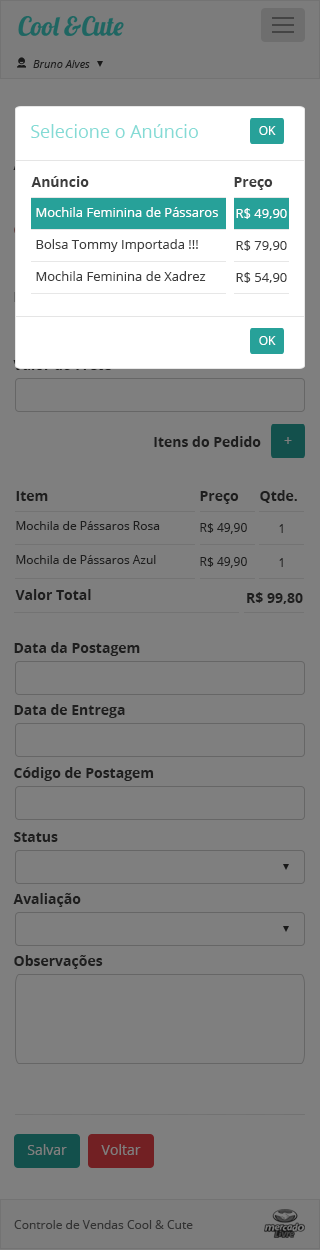
<style>
.page{position:relative;width:320px;height:1250px;background:#7f7f7f}
.page>*{position:absolute;margin:0}
.t1{font:11px "OpenSans-Italic";color:#1e1e1e}
.t2{font:18px "OpenSans";color:#83dbd5}
.t3{font:12px "OpenSans";color:#ffffff}
.t4{font:14px "OpenSans-Bold";color:#3d3d3d}
.t5{font:13px "OpenSans";color:#ffffff}
.t6{font:13px "OpenSans";color:#3d3d3d}
.t7{font:14px "OpenSans-Bold";color:#1e1e1e}
.t8{font:14px "OpenSans";color:#7f7f7f}
.t9{font:12px "OpenSans";color:#1e1e1e}
.t10{font:12px "OpenSans";color:#3d3d3d}
.t11{font:12px "OpenSans";color:#333333}
</style>
<div class="page">
<p class="t1" style="left:33px;top:60px;width:57px;height:8px">Bruno Alves</p>
<p class="t2" style="left:31px;top:124px;width:167px;height:14px">Selecione o Anúncio</p>
<p class="t3" style="left:259px;top:126px;width:17px;height:9px">OK</p>
<p class="t4" style="left:31px;top:176px;width:58px;height:11px">Anúncio</p>
<p class="t4" style="left:234px;top:177px;width:39px;height:13px">Preço</p>
<p class="t5" style="left:36px;top:207px;width:182px;height:10px">Mochila Feminina de Pássaros</p>
<p class="t5" style="left:236px;top:208px;width:51px;height:11px">R$ 49,90</p>
<p class="t6" style="left:36px;top:239px;width:162px;height:13px">Bolsa Tommy Importada !!!</p>
<p class="t6" style="left:236px;top:240px;width:51px;height:11px">R$ 79,90</p>
<p class="t6" style="left:36px;top:271px;width:170px;height:10px">Mochila Feminina de Xadrez</p>
<p class="t6" style="left:236px;top:272px;width:51px;height:11px">R$ 54,90</p>
<p class="t3" style="left:259px;top:336px;width:17px;height:9px">OK</p>
<p class="t7" style="left:154px;top:436px;width:107px;height:11px">Itens do Pedido</p>
<p class="t8" style="left:284px;top:437px;width:8px;height:7px">+</p>
<p class="t7" style="left:16px;top:491px;width:32px;height:10px">Item</p>
<p class="t7" style="left:200px;top:491px;width:39px;height:13px">Preço</p>
<p class="t7" style="left:260px;top:490px;width:37px;height:13px">Qtde.</p>
<p class="t9" style="left:16px;top:521px;width:144px;height:9px">Mochila de Pássaros Rosa</p>
<p class="t9" style="left:200px;top:523px;width:47px;height:11px">R$ 49,90</p>
<p class="t10" style="left:279px;top:524px;width:4px;height:9px">1</p>
<p class="t9" style="left:16px;top:555px;width:140px;height:9px">Mochila de Pássaros Azul</p>
<p class="t9" style="left:200px;top:557px;width:47px;height:11px">R$ 49,90</p>
<p class="t10" style="left:279px;top:558px;width:4px;height:9px">1</p>
<p class="t7" style="left:15px;top:589px;width:76px;height:11px">Valor Total</p>
<p class="t7" style="left:247px;top:592px;width:56px;height:12px">R$ 99,80</p>
<p class="t7" style="left:14px;top:642px;width:126px;height:14px">Data da Postagem</p>
<p class="t7" style="left:14px;top:704px;width:111px;height:14px">Data de Entrega</p>
<p class="t7" style="left:14px;top:767px;width:140px;height:14px">Código de Postagem</p>
<p class="t7" style="left:14px;top:832px;width:44px;height:10px">Status</p>
<p class="t7" style="left:13px;top:893px;width:68px;height:14px">Avaliação</p>
<p class="t7" style="left:14px;top:955px;width:89px;height:14px">Observações</p>
<p class="t8" style="left:27px;top:1144px;width:40px;height:11px">Salvar</p>
<p class="t8" style="left:101px;top:1144px;width:40px;height:11px">Voltar</p>
<p class="t11" style="left:14px;top:1220px;width:179px;height:9px">Controle de Vendas Cool &amp; Cute</p>
</div>
